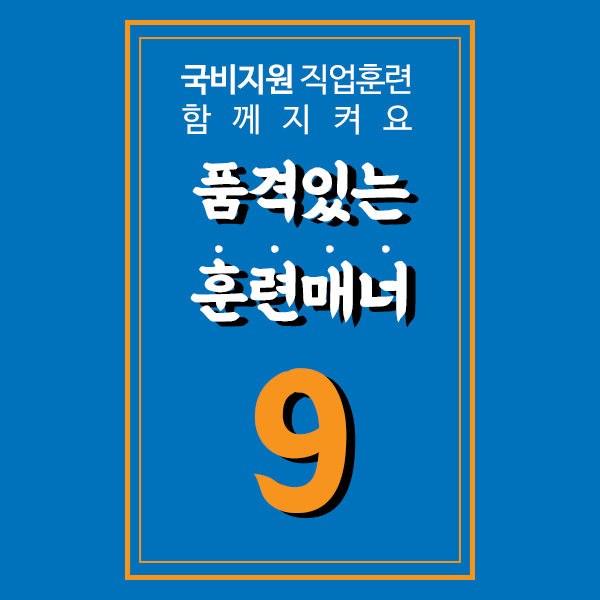
<style>
.page{position:relative;width:600px;height:600px;background:#0072bb}
.page>*{position:absolute;margin:0}
.t1{font:32.7px/40px "NanumBarunGothic";letter-spacing:0.65em;color:#ffffff}
.t2{font:32.7px/40px "NanumBarunGothicBold";letter-spacing:-0.03em;color:#ffffff}
.t3{font:32.7px/40px "NanumBarunGothic";letter-spacing:-0.03em;color:#ffffff}
.t4{font:68.4px/83.7px "BMEULJIROTTF";letter-spacing:-0.03em;color:#ffffff}
.t5{font:68.4px/100.5px "BMEULJIROTTF";letter-spacing:-0.03em;color:#ffffff}
.t6{font:194px/188.4px "BMEULJIROTTF";letter-spacing:-0.03em;color:#f7941d}
.t7{font:46.7px "BMEULJIROTTF";letter-spacing:-0.03em;color:#ffffff}
</style>
<div class="page">
<p class="t1" style="left:181px;top:64px;width:231px;height:71px;text-align:center"><span class="t2">국비지원 </span><span class="t3">직업훈련<br></span>함께지켜요</p>
<p class="t4" style="left:190px;top:159px;width:220px;height:354px;text-align:center">품격있는<br><span class="t5">훈련매너<br></span><span class="t6">9</span></p>
<p class="t7" style="left:215px;top:245px;width:8px;height:8px">·</p>
<p class="t7" style="left:271px;top:245px;width:8px;height:8px">·</p>
<p class="t7" style="left:326px;top:245px;width:8px;height:8px">·</p>
<p class="t7" style="left:382px;top:245px;width:8px;height:8px">·</p>
</div>
